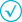
<style>
.page{position:relative;width:22px;height:22px;background:#ffffff}
.page>*{position:absolute;margin:0}
.t1{font:17.1px "AppleSymbols";letter-spacing:0.2em;color:#0caed2;font-weight:bold}
</style>
<div class="page">
<p class="t1" style="left:5px;top:5px;width:12px;height:12px">√</p>
</div>
